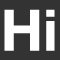
<style>
.page{position:relative;width:60px;height:60px;background:#333333}
.page>*{position:absolute;margin:0}
.t1{font:57px "HelveticaNeue-Bold";color:#ffffff}
</style>
<div class="page">
<p class="t1" style="left:4px;top:9px;width:51px;height:42px">Hi</p>
</div>
